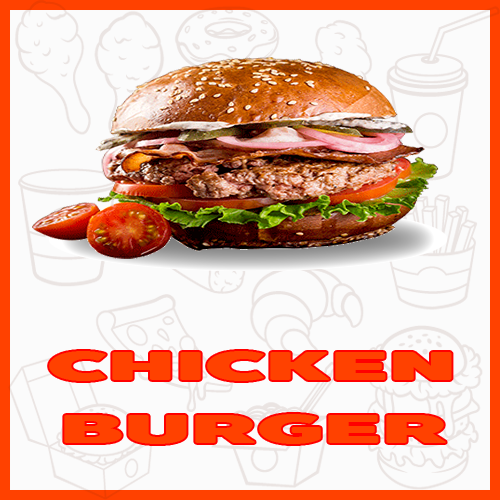
<style>
.page{position:relative;width:500px;height:500px;background:#fbfbfb}
.page>*{position:absolute;margin:0}
.t1{font:40.5px "BoonTook-Mon-Ultra";color:#ff4100;scale:2.16 1}
</style>
<div class="page">
<p class="t1" style="left:49px;top:351px;width:403px;height:30px">CHICKEN</p>
<p class="t1" style="left:64px;top:414px;width:382px;height:30px">BURGER</p>
</div>
